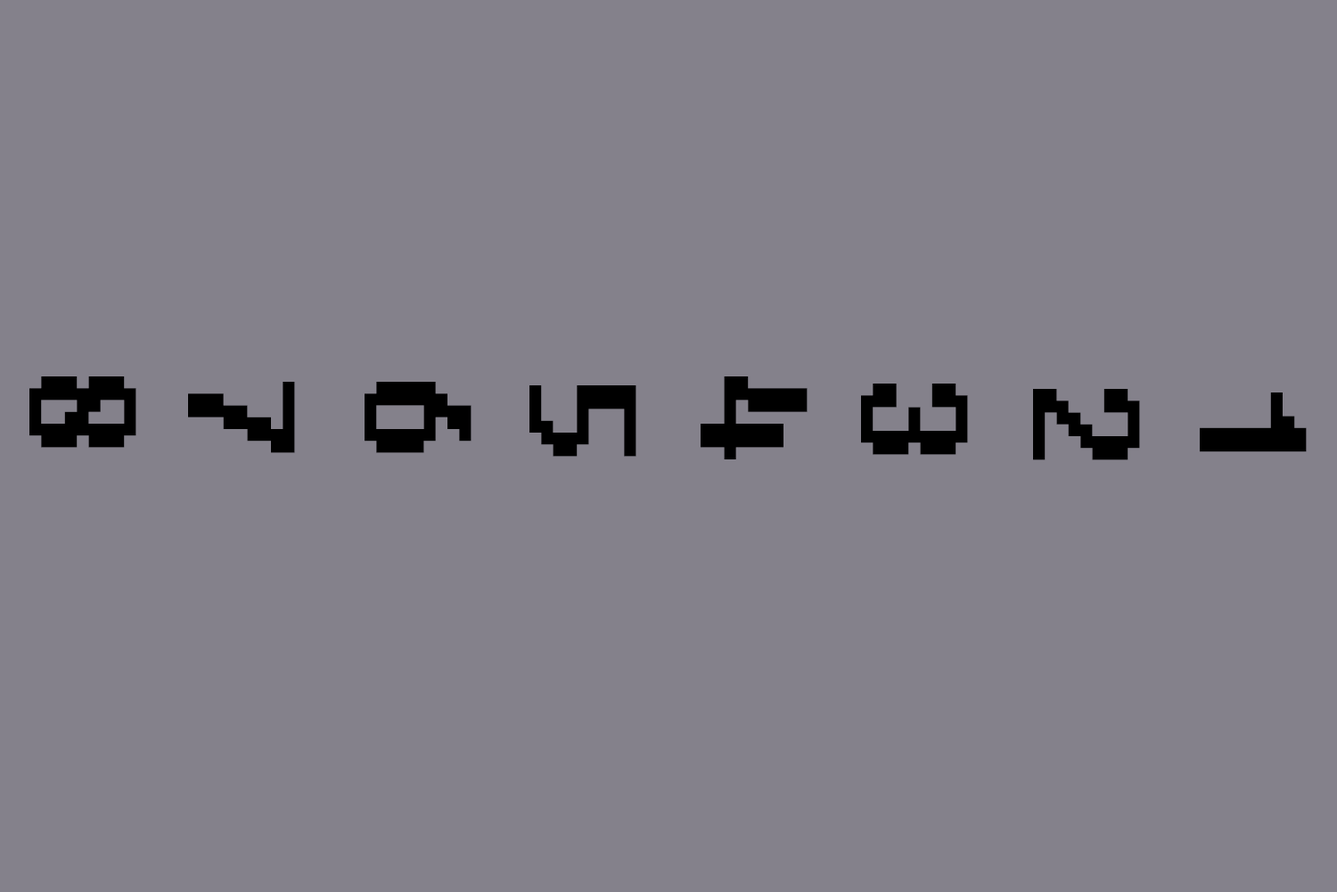
<style>
.page{position:relative;width:1337px;height:892px;background:#84818b}
.page>*{position:absolute;margin:0}
.t1{font:151.6px "Fixedsys";color:#000000}
</style>
<div class="page">
<p class="t1" style="left:29px;top:376px;width:107px;height:72px;rotate:90deg">8</p>
<p class="t1" style="left:701px;top:376px;width:107px;height:83px;rotate:90deg">4</p>
<p class="t1" style="left:188px;top:382px;width:107px;height:71px;rotate:90deg">7</p>
<p class="t1" style="left:365px;top:382px;width:107px;height:71px;rotate:90deg">6</p>
<p class="t1" style="left:530px;top:385px;width:107px;height:72px;rotate:90deg">5</p>
<p class="t1" style="left:861px;top:383px;width:107px;height:72px;rotate:90deg">3</p>
<p class="t1" style="left:1033px;top:389px;width:107px;height:71px;rotate:90deg">2</p>
<p class="t1" style="left:1200px;top:392px;width:107px;height:60px;rotate:90deg">1</p>
</div>
